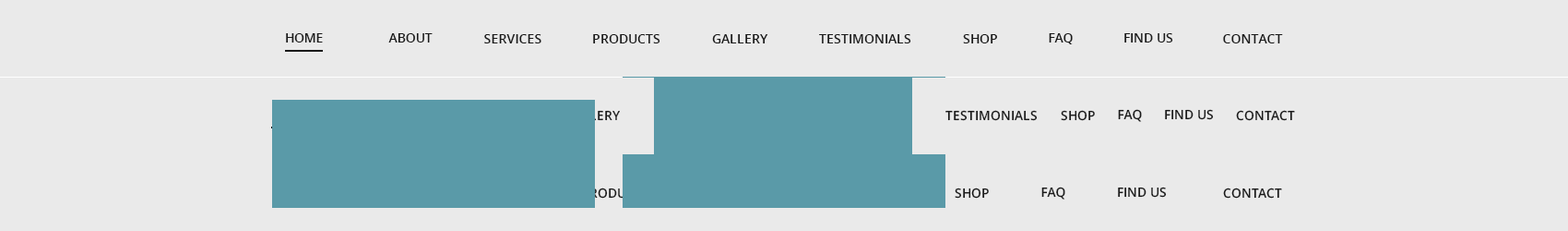
<style>
.page{position:relative;width:1568px;height:231px;background:#eaeaea}
.page>*{position:absolute;margin:0}
.t1{font:12.9px "OpenSans-Semibold";letter-spacing:-0.015em;color:#1a1a1a;text-transform:uppercase}
.t2{font:12.9px "OpenSans-Semibold";color:#1a1a1a;text-transform:uppercase}
.t3{font:12.9px "OpenSans-Semibold";text-transform:uppercase}
</style>
<div class="page">
<p class="t1" style="left:286px;top:32px;width:37px;height:11px">Home</p>
<p class="t1" style="left:286px;top:33px;width:37px;height:9px">Home</p>
<p class="t2" style="left:388px;top:33px;width:45px;height:9px">About</p>
<p class="t2" style="left:484px;top:34px;width:57px;height:9px">Services</p>
<p class="t2" style="left:593px;top:34px;width:67px;height:9px">Products</p>
<p class="t2" style="left:712px;top:34px;width:56px;height:9px">Gallery</p>
<p class="t2" style="left:819px;top:34px;width:92px;height:9px">Testimonials</p>
<p class="t2" style="left:963px;top:34px;width:34px;height:9px">Shop</p>
<p class="t2" style="left:1049px;top:33px;width:24px;height:11px">FAQ</p>
<p class="t2" style="left:1124px;top:33px;width:49px;height:9px">Find Us</p>
<p class="t2" style="left:1223px;top:33px;width:59px;height:11px">Contact</p>
<p class="t2" style="left:1223px;top:34px;width:60px;height:9px">Contact</p>
<p class="t3" style="left:564px;top:110px;width:56px;height:11px">Gallery</p>
<p class="t2" style="left:945px;top:110px;width:93px;height:11px">Testimonials</p>
<p class="t2" style="left:1061px;top:110px;width:34px;height:11px">Shop</p>
<p class="t2" style="left:1118px;top:109px;width:24px;height:13px">FAQ</p>
<p class="t2" style="left:1165px;top:109px;width:49px;height:11px">Find Us</p>
<p class="t2" style="left:1236px;top:110px;width:59px;height:11px">Contact</p>
<p class="t3" style="left:582px;top:187px;width:67px;height:11px">Products</p>
<p class="t2" style="left:955px;top:187px;width:34px;height:11px">Shop</p>
<p class="t2" style="left:1041px;top:186px;width:24px;height:13px">FAQ</p>
<p class="t2" style="left:1118px;top:186px;width:49px;height:11px">Find Us</p>
<p class="t2" style="left:1223px;top:187px;width:59px;height:11px">Contact</p>
</div>
